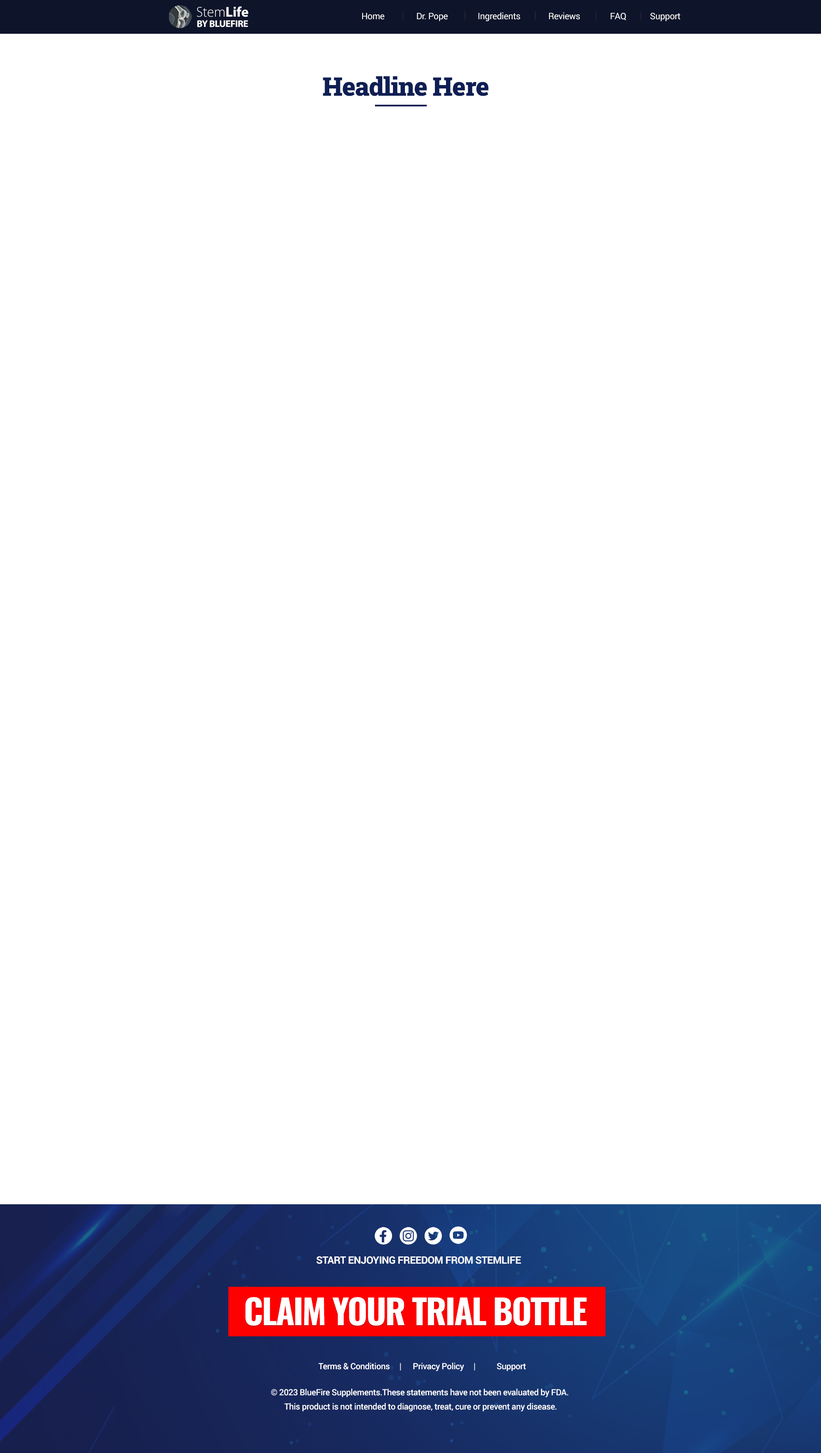
<style>
.page{position:relative;width:821px;height:1453px;background:#ffffff}
.page>*{position:absolute;margin:0}
.t1{font:14.2px "MyriadPro-Light";letter-spacing:-0.005em;color:#ffffff}
.t2{font:14.2px "MyriadPro-Bold";letter-spacing:-0.005em;color:#ffffff}
.t3{font:8.9px "Roboto-Regular";letter-spacing:-0.025em;color:#ffffff}
.t4{font:9.6px "MyriadPro-Bold";letter-spacing:-0.025em;color:#ffffff;text-transform:uppercase}
.t5{font:25.6px "RobotoSlab-Black";letter-spacing:-0.025em;color:#0f1e54}
.t6{font:10.3px "Roboto-Bold";letter-spacing:-0.025em;color:#fffffe;text-transform:uppercase}
.t7{font:34.2px "Oswald-Bold";letter-spacing:-0.035em;color:#ffffff;text-transform:uppercase}
.t8{font:8.5px "Roboto-Medium";letter-spacing:-0.025em;color:#fffffe}
.t9{font:8.5px/14.2px "Roboto-Medium";letter-spacing:-0.025em;color:#fffffe}
</style>
<div class="page">
<p class="t1" style="left:197px;top:6px;width:51px;height:11px">Stem<span class="t2">Life</span></p>
<p class="t3" style="left:362px;top:12px;width:318px;height:9px">Home                Dr. Pope               Ingredients              Reviews               FAQ            Support</p>
<p class="t4" style="left:197px;top:20px;width:51px;height:7px">By Bluefire</p>
<p class="t5" style="left:323px;top:76px;width:166px;height:20px">Headline Here</p>
<p class="t6" style="left:316px;top:1256px;width:205px;height:8px">Start Enjoying Freedom From Stemlife</p>
<p class="t7" style="left:245px;top:1297px;width:341px;height:29px">Claim Your Trial Bottle</p>
<p class="t8" style="left:318px;top:1363px;width:208px;height:9px">Terms &amp; Conditions     |      Privacy Policy     |           Support</p>
<p class="t9" style="left:271px;top:1389px;width:297px;height:23px;text-align:center">© 2023 BlueFire Supplements.These statements have not been evaluated by FDA. <br>This product is not intended to diagnose, treat, cure or prevent any disease.</p>
</div>
